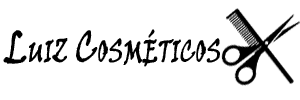
<style>
.page{position:relative;width:300px;height:100px;background:#ffffff}
.page>*{position:absolute;margin:0}
.t1{font:45px "VinerHandITC";color:#000000;font-variant:small-caps;font-weight:bold;scale:0.67 1}
</style>
<div class="page">
<p class="t1" style="left:3px;top:29px;width:217px;height:38px">Luiz Cosméticos</p>
</div>
